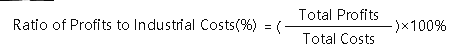
<style>
.page{position:relative;width:457px;height:54px;background:#ffffff}
.page>*{position:absolute;margin:0}
.t1{font:14px "MicrosoftYaHei";letter-spacing:-0.005em;color:#0d0d0d}
</style>
<div class="page">
<p class="t1" style="left:299px;top:9px;width:79px;height:11px">Total Profits</p>
<p class="t1" style="left:14px;top:19px;width:242px;height:13px">Ratio of Profits to Industrial Costs(%)</p>
<p class="t1" style="left:265px;top:21px;width:16px;height:13px">= (</p>
<p class="t1" style="left:396px;top:20px;width:50px;height:13px">)×100%</p>
<p class="t1" style="left:303px;top:33px;width:71px;height:11px">Total Costs</p>
</div>
